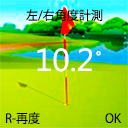
<style>
.page{position:relative;width:128px;height:128px}
.page>*{position:absolute;margin:0}
.t1{font:12.3px "KozGoPr6N-Regular";color:#000000}
.t2{font:31.7px "MicrosoftNewTaiLue";color:#ffffff}
.t3{font:16px "KozGoPr6N-Regular";color:#ffffff}
</style>
<div class="page">
<p class="t1" style="left:26px;top:9px;width:77px;height:12px">左/右角度計測</p>
<p class="t2" style="left:37px;top:48px;width:55px;height:24px">10.2</p>
<p class="t3" style="left:96px;top:51px;width:5px;height:5px">°</p>
<p class="t1" style="left:6px;top:112px;width:34px;height:12px">R-再度</p>
<p class="t1" style="left:105px;top:113px;width:17px;height:10px">OK</p>
</div>
